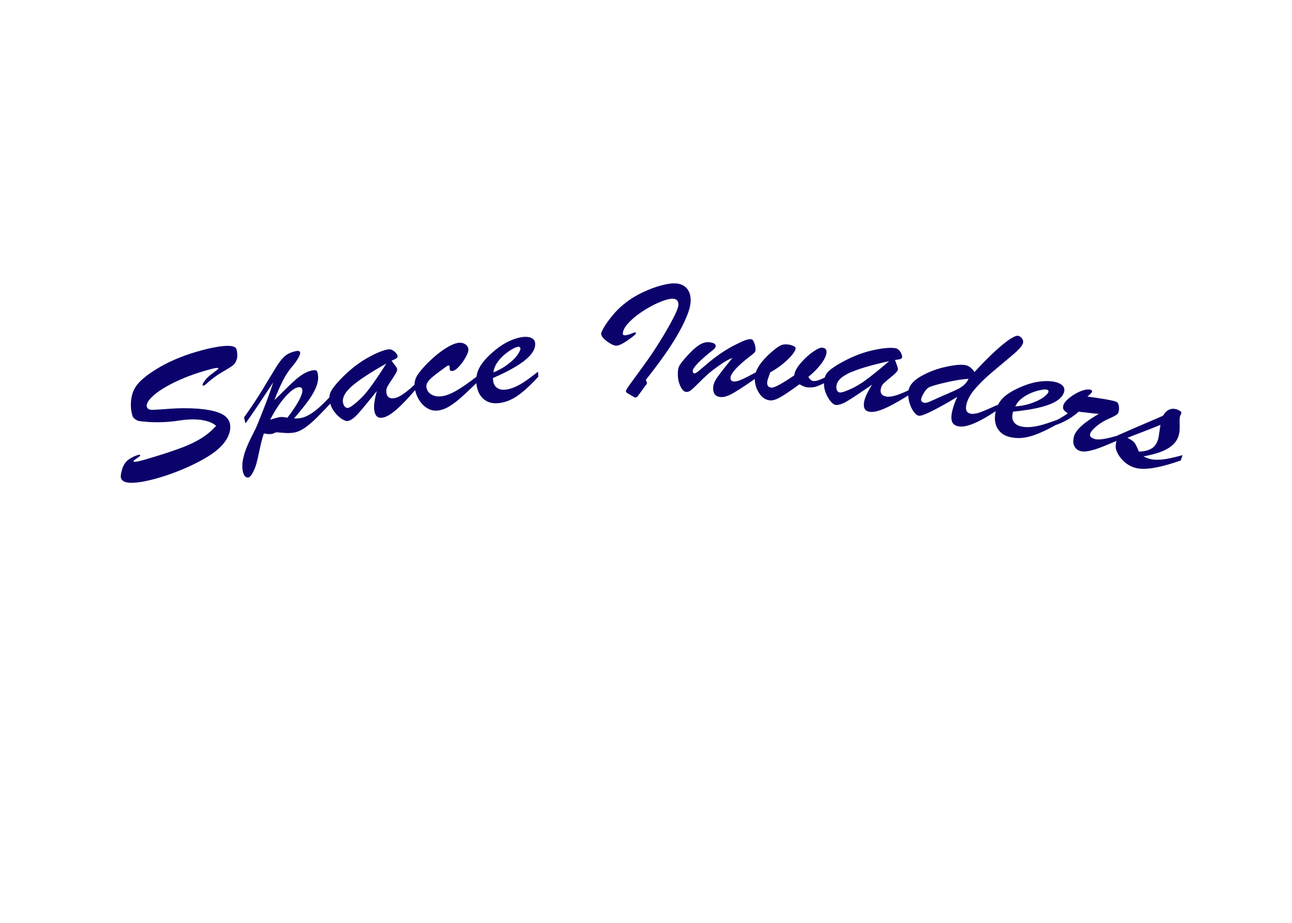
<style>
.page{position:relative;width:1292px;height:923px;background:#ffffff}
.page>*{position:absolute;margin:0}
.t1{font:170.5px "BrushScriptMT";color:#0c026b}
</style>
<div class="page">
<p class="t1" style="left:121px;top:283px;width:1062px;height:200px">Space Invaders</p>
</div>
